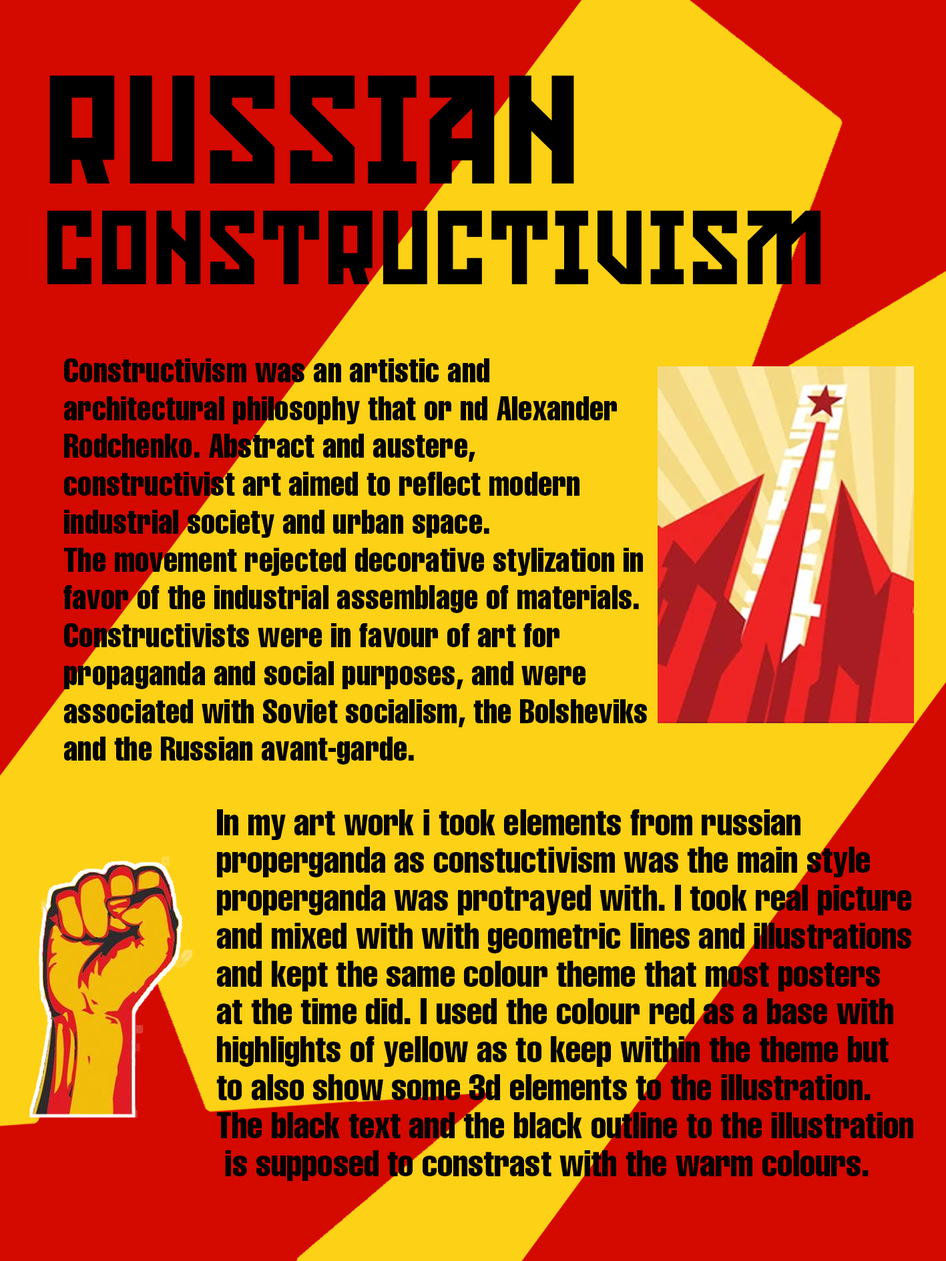
<style>
.page{position:relative;width:946px;height:1261px;background:#fcd116}
.page>*{position:absolute;margin:0}
.t1{font:100.1px/100.4px "KonstruktorRegular";color:#000000}
.t2{font:146.8px "KonstruktorRegular";color:#000000}
.t3{font:33.4px/37.9px "Helvetica-Compressed";color:#000000}
.t4{font:36.1px/37.9px "Helvetica-Compressed";color:#000000}
</style>
<div class="page">
<p class="t1" style="left:47px;top:75px;width:774px;height:209px"><span class="t2">RUSSIAN<br></span>CONSTRUCTIVISM</p>
<p class="t3" style="left:63px;top:358px;width:584px;height:407px">Constructivism was an artistic and<br>architectural philosophy that or nd Alexander <br>Rodchenko. Abstract and austere, <br>constructivist art aimed to reflect modern <br>industrial society and urban space.<br>The movement rejected decorative stylization in <br>favor of the industrial assemblage of materials.<br>Constructivists were in favour of art for<br>propaganda and social purposes, and were<br>associated with Soviet socialism, the Bolsheviks <br>and the Russian avant-garde.</p>
<p class="t4" style="left:216px;top:809px;width:697px;height:372px">In my art work i took elements from russian <br>properganda as constuctivism was the main style <br>properganda was protrayed with. I took real picture<br>and mixed with with geometric lines and illustrations<br>and kept the same colour theme that most posters <br>at the time did. I used the colour red as a base with <br>highlights of yellow as to keep within the theme but <br>to also show some 3d elements to the illustration. <br>The black text and the black outline to the illustration<br> is supposed to constrast with the warm colours.</p>
</div>
